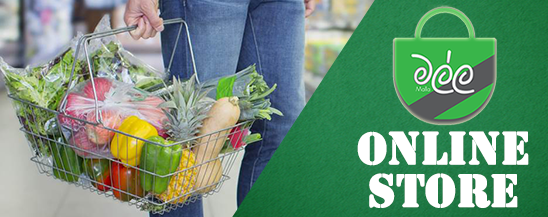
<style>
.page{position:relative;width:548px;height:217px}
.page>*{position:absolute;margin:0}
.t1{font:42.7px/42.7px "StencilStd";color:#ffffff;font-weight:bold}
.t2{font:41.3px/40px "StencilStd";color:#ffffff;font-weight:bold}
</style>
<div class="page">
<p class="t1" style="left:357px;top:131px;width:172px;height:77px;text-align:center"><span class="t2">O</span>Nline<br>Store</p>
</div>
